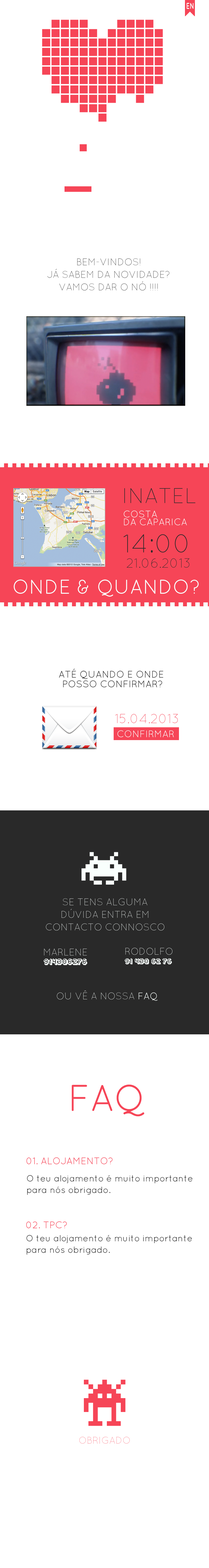
<style>
.page{position:relative;width:209px;height:1568px;background:#ffffff}
.page>*{position:absolute;margin:0}
.t1{font:8.5px "QuicksandBold-Regular";color:#f9fffd;scale:0.71 1}
.t2{font:9.7px/12.5px "QuicksandLight-Regular";color:#292929}
.t3{font:21.2px "QuicksandLight-Regular";color:#292929}
.t4{font:9.7px/7.8px "QuicksandBook-Regular";color:#f9fffd}
.t5{font:9.7px/7.8px "QuicksandBook-Regular";color:#292929}
.t6{font:25.9px "QuicksandLight-Regular";color:#292929}
.t7{font:13.2px "QuicksandLight-Regular";color:#292929}
.t8{font:20px "QuicksandBook-Regular";color:#f9fffd}
.t9{font:9.7px/9.6px "QuicksandBook-Regular";color:#292929}
.t10{font:13px "QuicksandLight-Regular";color:#f64557}
.t11{font:9.7px "QuicksandBook-Regular";color:#f9fffd}
.t12{font:65.1px "Pixel-Invaders";color:#f9fffd}
.t13{font:9.7px/12.5px "QuicksandLight-Regular";color:#f9fffd}
.t14{font:9.7px "QuicksandLight-Regular";color:#f9fffd}
.t15{font:5.1px "Fipps-Regular";color:#f9fffd}
.t16{font:4.7px "Fipps-Regular";color:#f9fffd}
.t17{font:37.1px "QuicksandBook-Regular";color:#f64557}
.t18{font:9.7px "QuicksandBook-Regular";color:#f64557}
.t19{font:8.9px/11.6px "QuicksandBook-Regular";color:#292929}
.t20{font:73.8px "Pixel-Invaders";color:#f64557}
.t21{font:9.7px "QuicksandDash-Regular";color:#f64557}
</style>
<div class="page">
<p class="t1" style="left:187px;top:3px;width:7px;height:6px">EN</p>
<p class="t2" style="left:47px;top:258px;width:122px;height:33px;text-align:center">BEM-VINDOS!<br>JÁ SABEM DA NOVIDADE?<br>VAMOS DAR O NÓ !!!!</p>
<p class="t3" style="left:124px;top:488px;width:71px;height:15px">INATEL</p>
<p class="t4" style="left:124px;top:510px;width:63px;height:15px"><span class="t5"><br></span>COSTA<br>DA CAPARICA</p>
<p class="t6" style="left:124px;top:534px;width:63px;height:19px">14:00</p>
<p class="t7" style="left:127px;top:558px;width:62px;height:10px">21.06.2013</p>
<p class="t8" style="left:14px;top:579px;width:185px;height:18px">ONDE &amp; QUANDO?</p>
<p class="t9" style="left:59px;top:669px;width:104px;height:18px;text-align:center">ATÉ QUANDO E ONDE <br>POSSO CONFIRMAR?</p>
<p class="t10" style="left:115px;top:714px;width:63px;height:9px">15.04.2013</p>
<p class="t11" style="left:117px;top:730px;width:57px;height:7px">CONFIRMAR</p>
<p class="t12" style="left:82px;top:852px;width:44px;height:33px">A</p>
<p class="t13" style="left:46px;top:898px;width:118px;height:33px;text-align:center">SE TENS ALGUMA<br>DÚVIDA ENTRA EM<br>CONTACTO CONNOSCO</p>
<p class="t14" style="left:44px;top:949px;width:43px;height:6px">MARLENE</p>
<p class="t14" style="left:125px;top:948px;width:47px;height:7px">RODOLFO</p>
<p class="t15" style="left:44px;top:959px;width:43px;height:6px">914306276</p>
<p class="t16" style="left:125px;top:958px;width:47px;height:6px">91 430 62 76</p>
<p class="t14" style="left:57px;top:990px;width:101px;height:11px">OU VÊ A NOSSA <span class="t11">FAQ</span></p>
<p class="t17" style="left:72px;top:1085px;width:72px;height:31px">FAQ</p>
<p class="t18" style="left:26px;top:1157px;width:87px;height:7px">01. ALOJAMENTO?</p>
<p class="t19" style="left:27px;top:1175px;width:166px;height:20px">O teu alojamento é muito importante <br>para nós obrigado.</p>
<p class="t18" style="left:26px;top:1221px;width:41px;height:7px">02. TPC?</p>
<p class="t19" style="left:26px;top:1235px;width:166px;height:20px">O teu alojamento é muito importante <br>para nós obrigado.</p>
<p class="t20" style="left:84px;top:1380px;width:41px;height:46px">b</p>
<p class="t21" style="left:79px;top:1437px;width:51px;height:7px">OBRIGADO</p>
</div>
